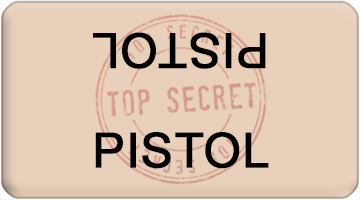
<style>
.page{position:relative;width:360px;height:200px;background:#e8d0bb}
.page>*{position:absolute;margin:0}
.t1{font:48px "ArialMT";color:#000000;font-weight:bold}
</style>
<div class="page">
<p class="t1" style="left:93px;top:32px;width:173px;height:37px;rotate:180deg">PISTOL</p>
<p class="t1" style="left:95px;top:132px;width:174px;height:37px">PISTOL</p>
</div>
